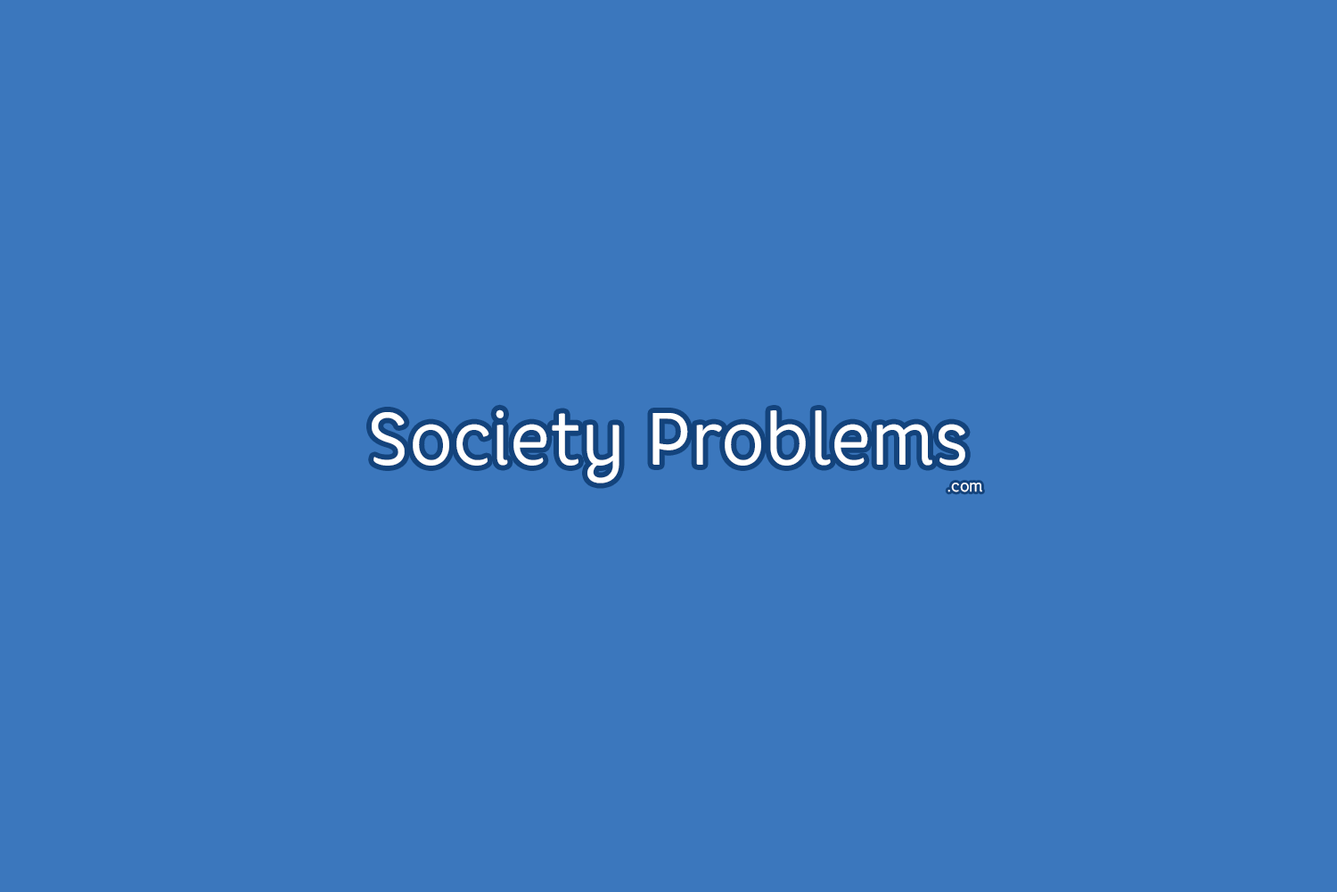
<style>
.page{position:relative;width:1337px;height:892px;background:#3b77bd}
.page>*{position:absolute;margin:0}
.t1{font:74px "CoreRhino45Regular";color:#ffffff;scale:0.94 1}
.t2{font:16px "CoreRhino45Regular";color:#ffffff;scale:0.94 1}
</style>
<div class="page">
<p class="t1" style="left:372px;top:409px;width:594px;height:74px">Society Problems</p>
<p class="t2" style="left:948px;top:482px;width:35px;height:10px">com.</p>
</div>
